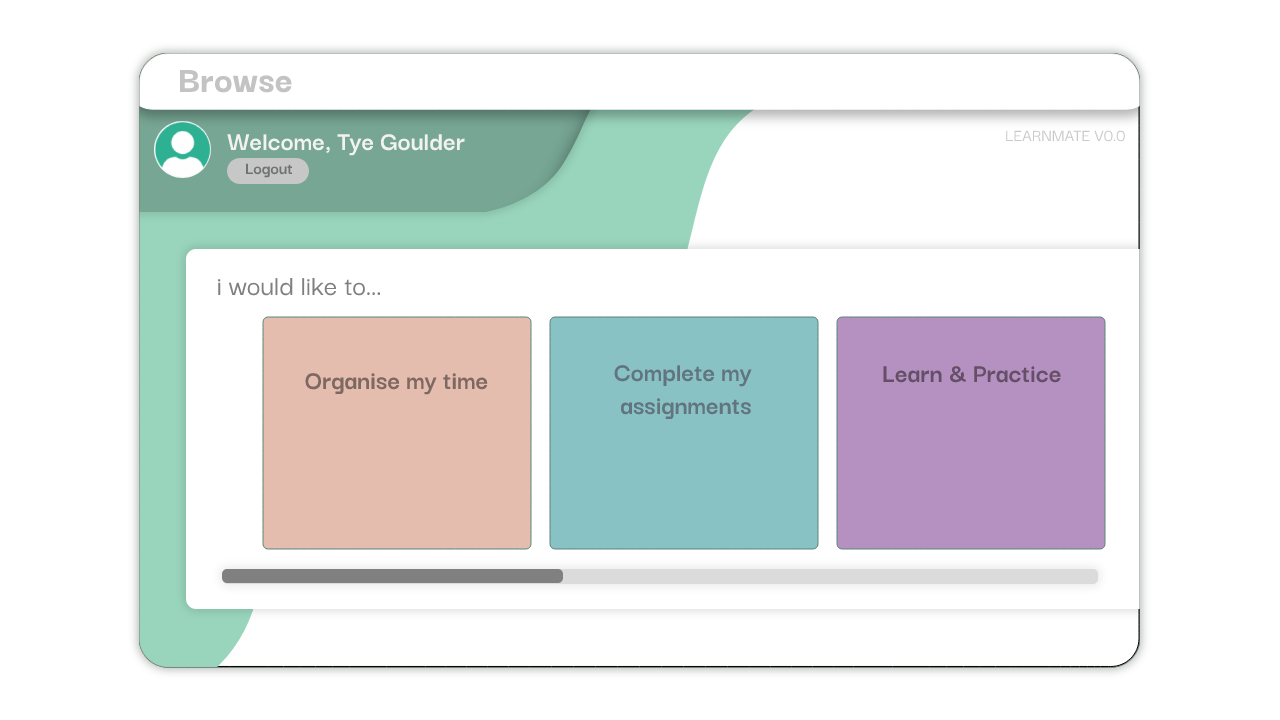
<style>
.page{position:relative;width:1280px;height:720px;background:#ffffff}
.page>*{position:absolute;margin:0}
.t1{font:39px "DarkerGrotesque-ExtraBold";color:#c3c3c3}
.t2{font:27.8px "DarkerGrotesque-Bold";color:#f2f2f2}
.t3{font:18px "DarkerGrotesque-Medium";color:#c9c9c9}
.t4{font:30px "DarkerGrotesque-Medium";color:#7f7f7f}
.t5{font:27.8px "DarkerGrotesque-Bold";color:#62757e}
.t6{font:27.8px "DarkerGrotesque-Bold";color:#654f66}
.t7{font:27.8px "DarkerGrotesque-Bold";color:#7e6862}
</style>
<div class="page">
<p class="t1" style="left:180px;top:70px;width:112px;height:23px">Browse</p>
<p class="t2" style="left:227px;top:134px;width:238px;height:22px">Welcome, Tye Goulder</p>
<p class="t3" style="left:1006px;top:130px;width:119px;height:12px">LEARNMATE V0.0</p>
<p class="t4" style="left:218px;top:278px;width:163px;height:18px">i would like to...</p>
<p class="t5" style="left:614px;top:365px;width:138px;height:55px;text-align:center">Complete my <br>assignments</p>
<p class="t6" style="left:883px;top:366px;width:178px;height:17px">Learn &amp; Practice</p>
<p class="t7" style="left:305px;top:373px;width:183px;height:22px">Organise my time</p>
</div>
